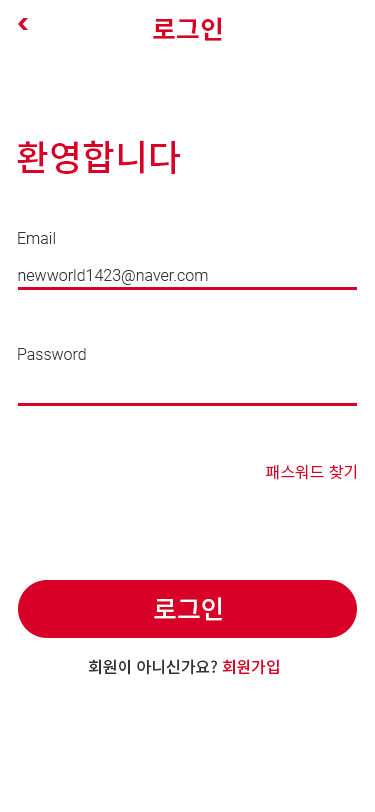
<style>
.page{position:relative;width:375px;height:812px;background:#ffffff}
.page>*{position:absolute;margin:0}
.t1{font:26px "NotoSansKR-Bold";color:#d80027}
.t2{font:36px "NotoSansKR-Medium";color:#d80027}
.t3{font:16px "Roboto-Light";color:#333333}
.t4{font:16px "NotoSansKR-Regular";color:#d80027}
.t5{font:26px "NotoSansKR-Medium";color:#ffffff}
.t6{font:16px "NotoSansKR-Medium";color:#333333}
.t7{font:16px "NotoSansKR-Medium";color:#d80027}
</style>
<div class="page">
<p class="t1" style="left:153px;top:17px;width:69px;height:24px">로그인</p>
<p class="t2" style="left:17px;top:140px;width:163px;height:34px">환영합니다</p>
<p class="t3" style="left:18px;top:232px;width:37px;height:12px">Email</p>
<p class="t3" style="left:18px;top:269px;width:190px;height:16px">newworld1423@naver.com</p>
<p class="t3" style="left:18px;top:348px;width:68px;height:12px">Password</p>
<p class="t4" style="left:266px;top:464px;width:90px;height:16px">패스워드 찾기</p>
<p class="t5" style="left:154px;top:597px;width:68px;height:24px">로그인</p>
<p class="t6" style="left:88px;top:659px;width:191px;height:16px">회원이 아니신가요?<span class="t7"> 회원가입</span></p>
</div>
